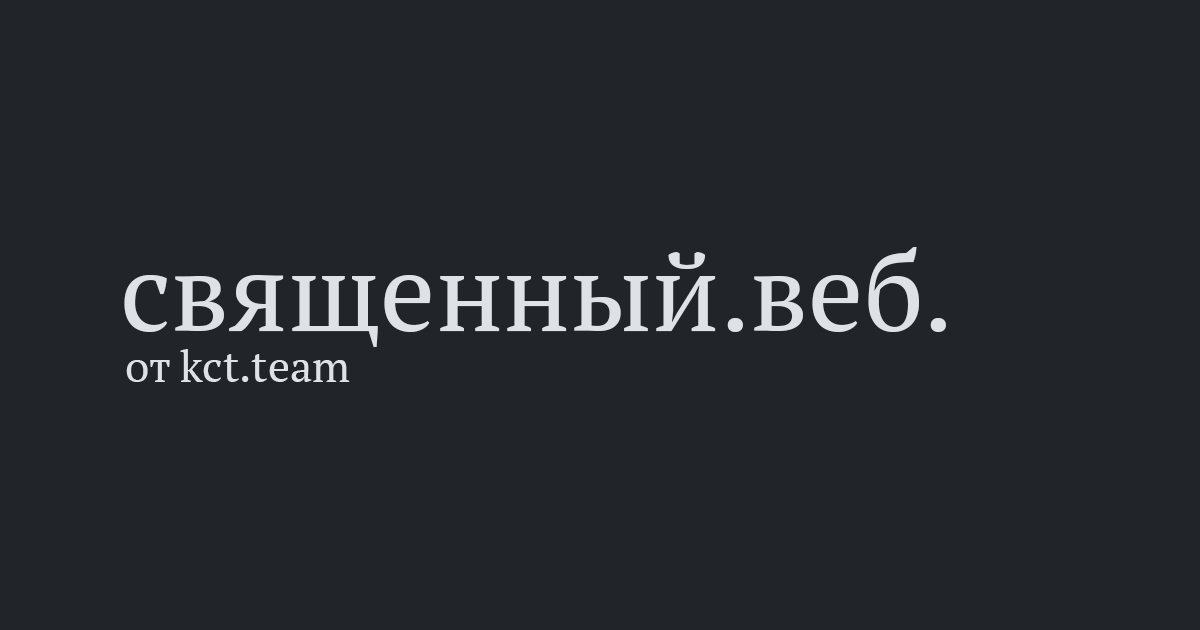
<style>
.page{position:relative;width:1200px;height:630px;background:#212529}
.page>*{position:absolute;margin:0}
.t1{font:109.8px "PTSerif-Regular";color:#dee2e6}
.t2{font:43.9px "PTSerif-Regular";color:#dee2e6}
</style>
<div class="page">
<p class="t1" style="left:124px;top:247px;width:822px;height:100px">священный.веб.</p>
<p class="t2" style="left:126px;top:349px;width:224px;height:33px">от kct.team</p>
</div>
